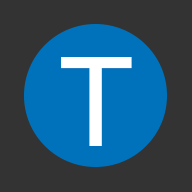
<style>
.page{position:relative;width:192px;height:192px;background:#333333}
.page>*{position:absolute;margin:0}
.t1{font:124.6px "TrebuchetMS";color:#ffffff}
</style>
<div class="page">
<p class="t1" style="left:61px;top:57px;width:71px;height:89px">T</p>
</div>
